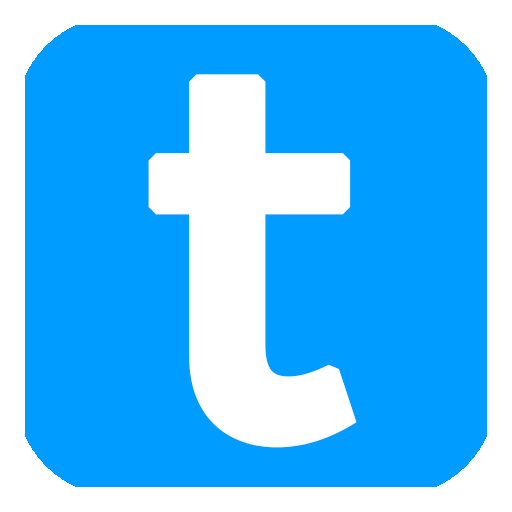
<style>
.page{position:relative;width:512px;height:512px;background:#009cff}
.page>*{position:absolute;margin:0}
.t1{font:540px "Montserrat-Regular";letter-spacing:0.05em;color:#ffffff;font-weight:bold}
</style>
<div class="page">
<p class="t1" style="left:148px;top:74px;width:209px;height:374px">t</p>
</div>
